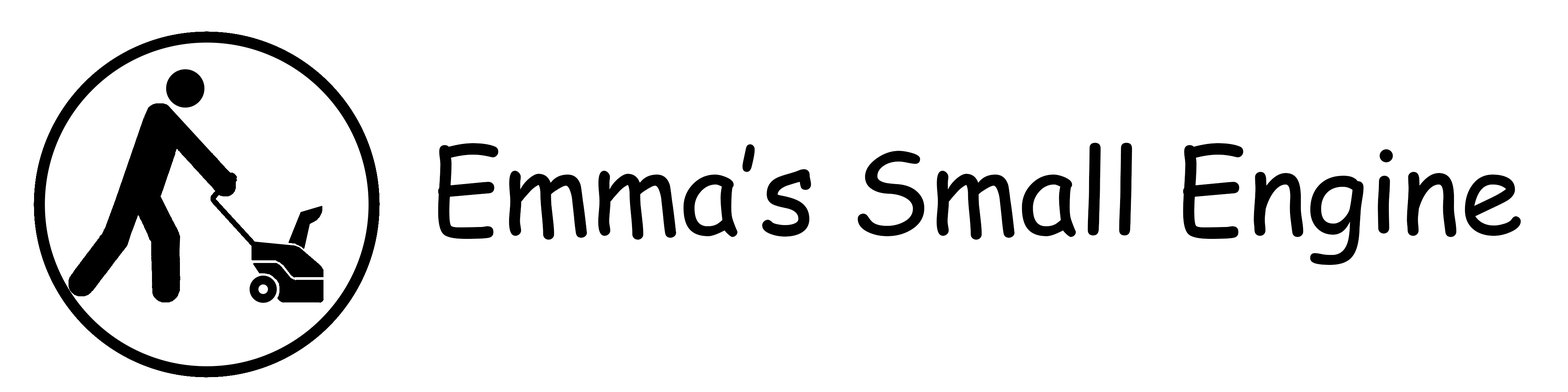
<style>
.page{position:relative;width:1568px;height:392px;background:#ffffff}
.page>*{position:absolute;margin:0}
.t1{font:114.8px "ComicSansMS";color:#000000}
</style>
<div class="page">
<p class="t1" style="left:438px;top:143px;width:1083px;height:122px">Emma’s Small Engine</p>
</div>
